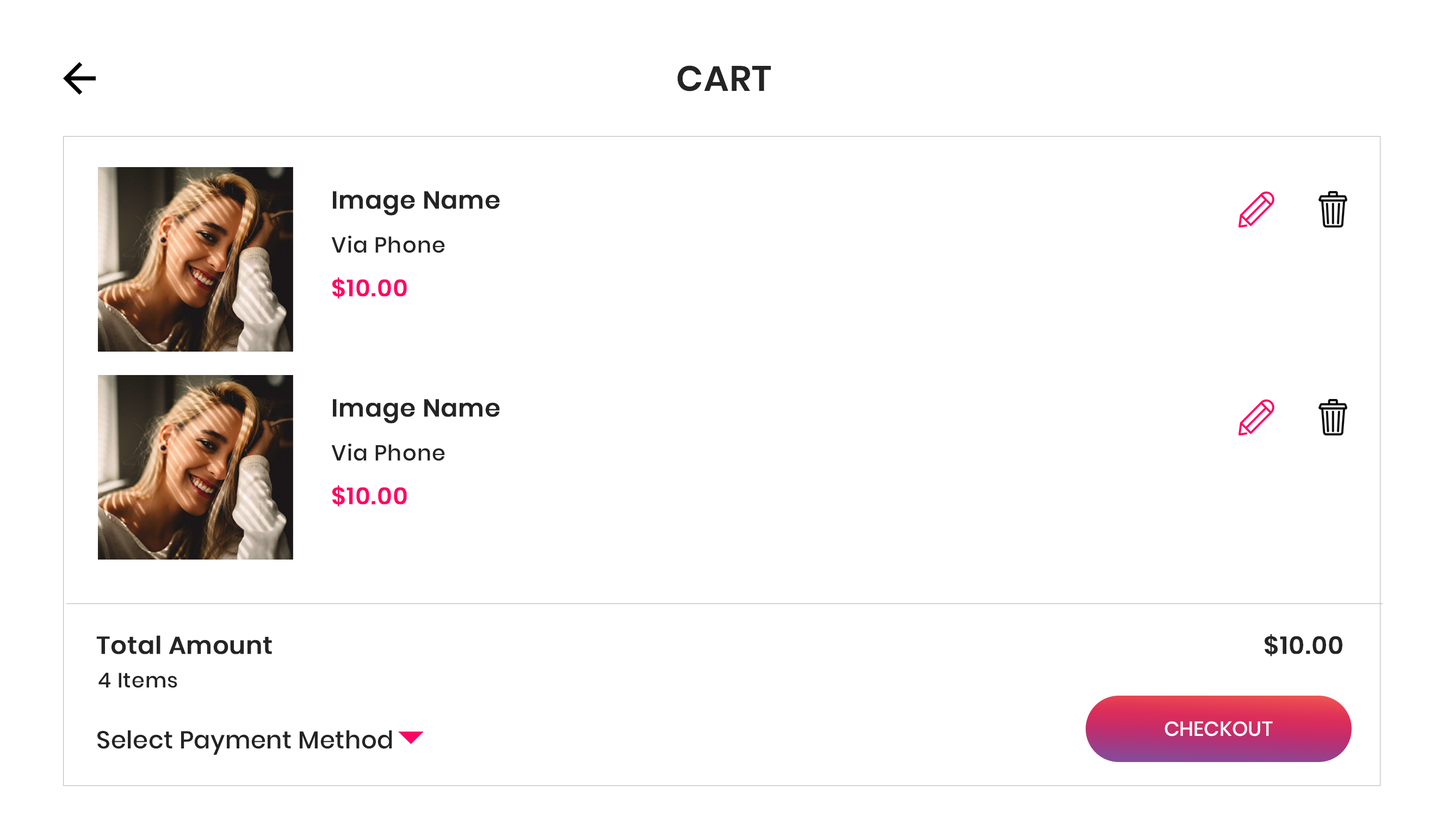
<style>
.page{position:relative;width:1449px;height:823px;background:#ffffff}
.page>*{position:absolute;margin:0}
.t1{font:35.4px "Poppins-SemiBold";letter-spacing:0.02em;color:#242424;text-transform:uppercase}
.t2{font:24.5px "Poppins-Medium";letter-spacing:0.01em;color:#242424;font-weight:bold}
.t3{font:21.8px "Poppins-Medium";letter-spacing:0.03em;color:#242424}
.t4{font:23.4px "Poppins-Medium";letter-spacing:0.03em;color:#ff0364;font-weight:bold}
.t5{font:24.5px "Poppins-Medium";letter-spacing:0.03em;color:#242424;font-weight:bold}
.t6{font:20.7px "Poppins-Medium";letter-spacing:0.03em;color:#242424}
.t7{font:20.3px "Poppins-Medium";color:#ffffff;text-transform:uppercase}
.t8{font:24.5px "Poppins-Medium";letter-spacing:0.01em;color:#242424}
</style>
<div class="page">
<p class="t1" style="left:677px;top:65px;width:95px;height:26px">Cart</p>
<p class="t2" style="left:333px;top:191px;width:167px;height:24px">Image Name</p>
<p class="t3" style="left:331px;top:236px;width:114px;height:17px">Via Phone</p>
<p class="t4" style="left:332px;top:277px;width:75px;height:22px">$10.00</p>
<p class="t2" style="left:333px;top:399px;width:167px;height:24px">Image Name</p>
<p class="t3" style="left:331px;top:443px;width:114px;height:18px">Via Phone</p>
<p class="t4" style="left:332px;top:485px;width:75px;height:22px">$10.00</p>
<p class="t2" style="left:96px;top:635px;width:176px;height:19px">Total Amount</p>
<p class="t5" style="left:1265px;top:634px;width:78px;height:22px">$10.00</p>
<p class="t6" style="left:98px;top:673px;width:79px;height:15px">4 Items</p>
<p class="t7" style="left:1165px;top:721px;width:108px;height:15px">checkout</p>
<p class="t8" style="left:97px;top:730px;width:295px;height:25px">Select Payment Method</p>
</div>
